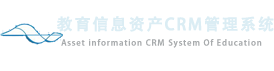
<style>
.page{position:relative;width:274px;height:71px;background:#ffffff}
.page>*{position:absolute;margin:0}
.t1{font:16px "AdobeHeitiStd-Regular";letter-spacing:0.1em;color:#dbedf4;font-weight:bold}
.t2{font:8px "AdobeHeitiStd-Regular";letter-spacing:0.1em;color:#a8abad;font-weight:bold}
</style>
<div class="page">
<p class="t1" style="left:57px;top:16px;width:217px;height:16px">教育信息资产CRM管理系统</p>
<p class="t2" style="left:61px;top:39px;width:201px;height:9px">Asset information CRM System Of Education</p>
</div>
